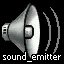
<style>
.page{position:relative;width:64px;height:64px;background:#000000}
.page>*{position:absolute;margin:0}
.t1{font:9px "Tahoma";color:#ffffff}
</style>
<div class="page">
<p class="t1" style="left:3px;top:52px;width:58px;height:10px">sound_emitter</p>
</div>
